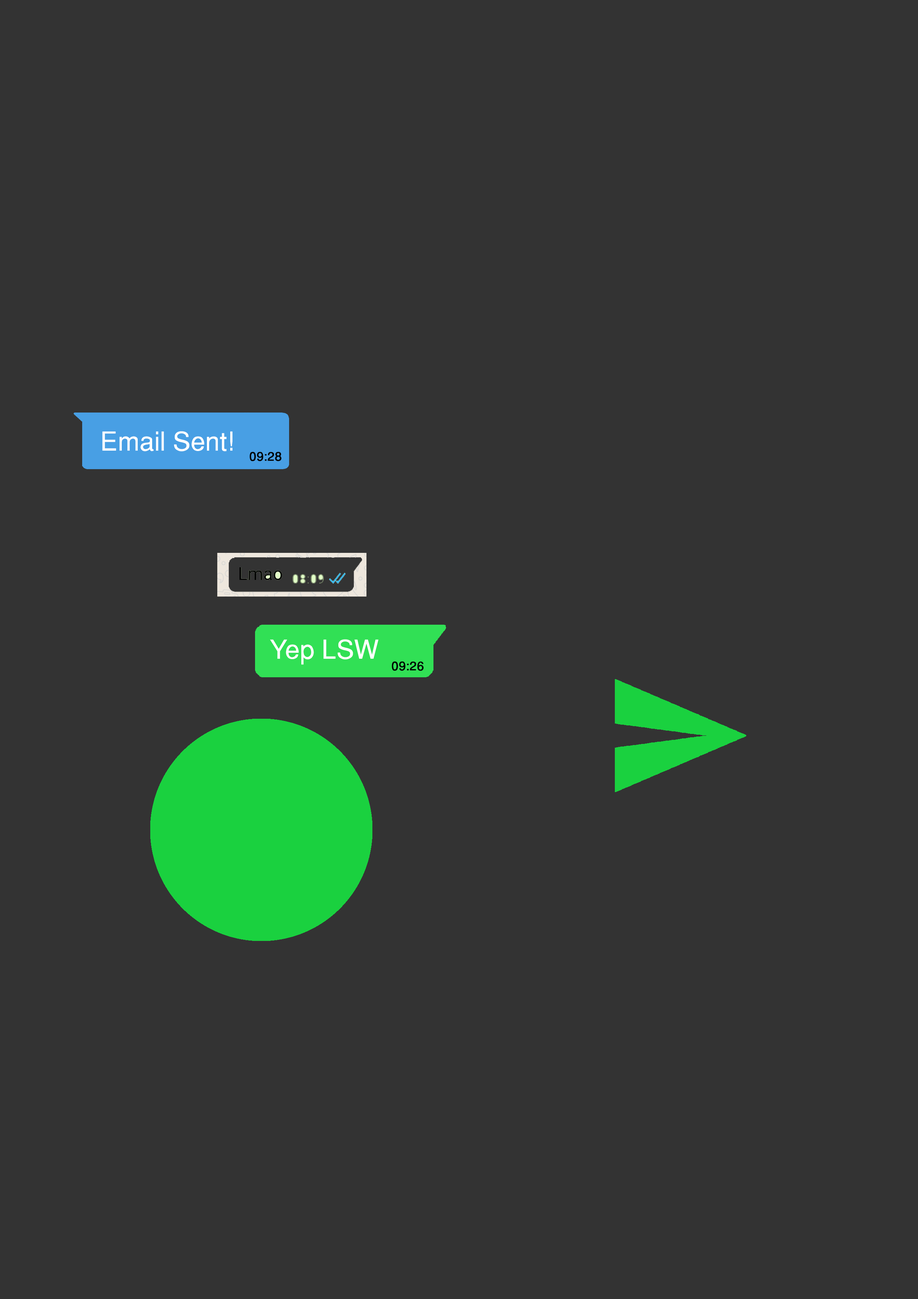
<style>
.page{position:relative;width:918px;height:1299px;background:#333333}
.page>*{position:absolute;margin:0}
.t1{font:26.2px "Helvetica-Normal";color:#ffffff}
.t2{font:12.3px "Helvetica-Normal";color:#000000;font-weight:bold}
</style>
<div class="page">
<p class="t1" style="left:102px;top:431px;width:130px;height:20px">Email Sent!</p>
<p class="t2" style="left:250px;top:452px;width:32px;height:9px">09:28</p>
<p class="t1" style="left:270px;top:639px;width:109px;height:26px">Yep LSW</p>
<p class="t2" style="left:392px;top:661px;width:32px;height:10px">09:26</p>
</div>
